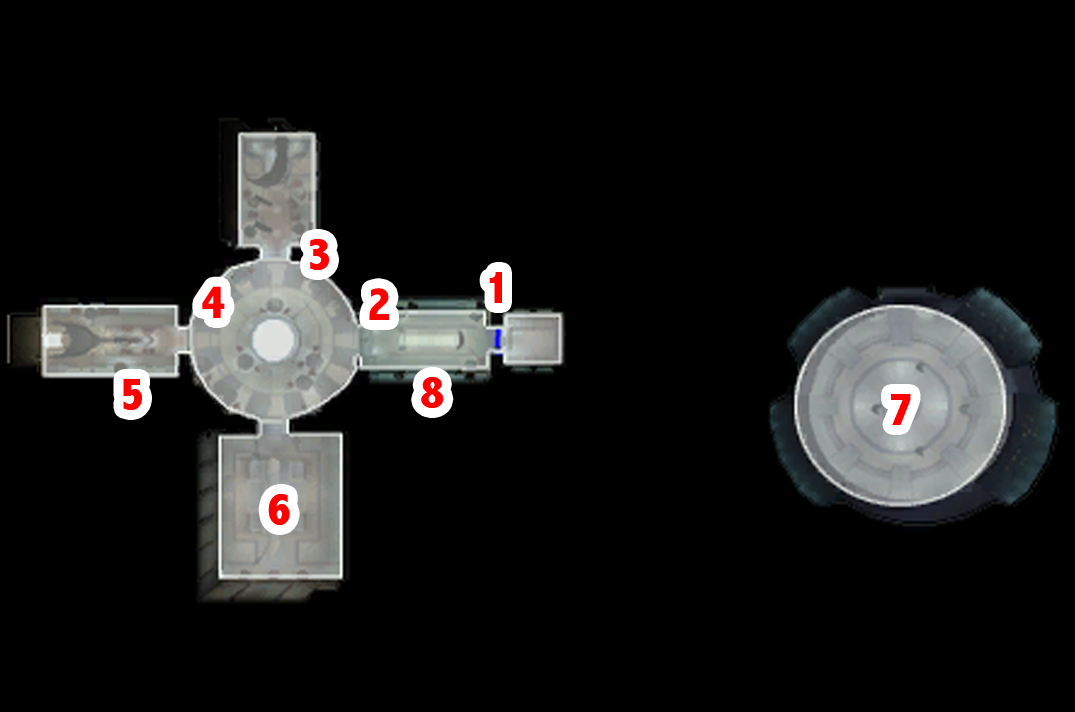
<style>
.page{position:relative;width:1075px;height:712px;background:#000000}
.page>*{position:absolute;margin:0}
.t1{font:48px "AbadiMT-CondensedExtraBold";color:#ff0000}
</style>
<div class="page">
<p class="t1" style="left:310px;top:239px;width:19px;height:31px">3</p>
<p class="t1" style="left:489px;top:272px;width:13px;height:31px">1</p>
<p class="t1" style="left:202px;top:286px;width:23px;height:32px">4</p>
<p class="t1" style="left:369px;top:288px;width:20px;height:32px">2</p>
<p class="t1" style="left:421px;top:377px;width:23px;height:31px">8</p>
<p class="t1" style="left:123px;top:379px;width:19px;height:31px">5</p>
<p class="t1" style="left:891px;top:394px;width:20px;height:31px">7</p>
<p class="t1" style="left:268px;top:494px;width:22px;height:31px">6</p>
</div>
